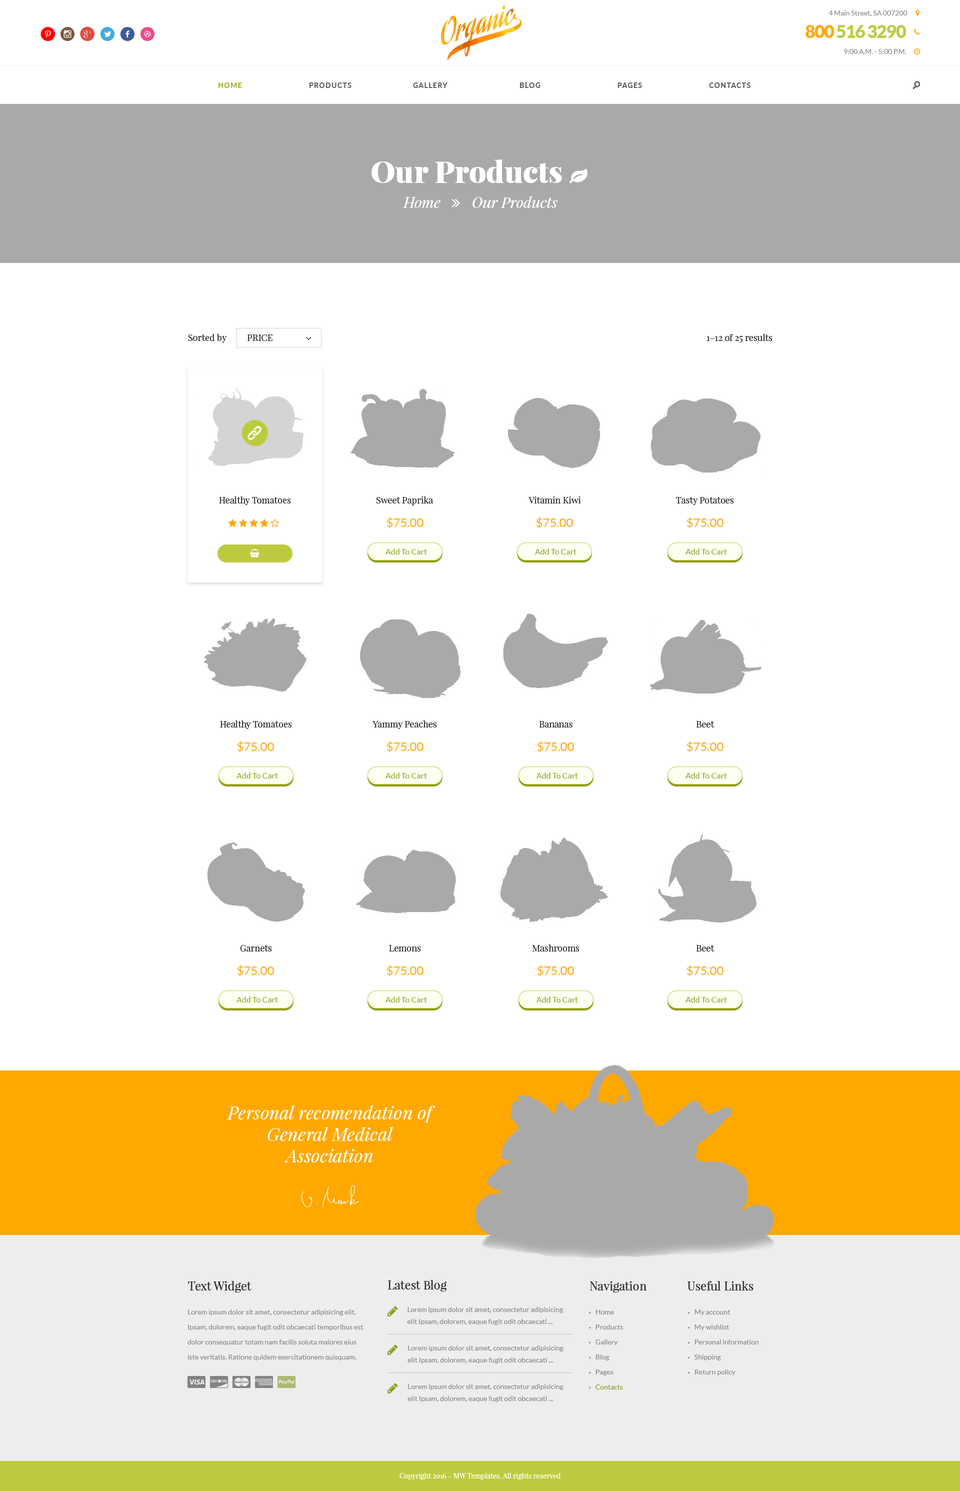
<style>
.page{position:relative;width:960px;height:1491px;background:#ffffff}
.page>*{position:absolute;margin:0}
.t1{font:7px "Lato-Regular";color:#898989}
.t2{font:20px "SocialicoPlus";letter-spacing:0.2em;color:#ff0000}
.t3{font:20px "SocialicoPlus";letter-spacing:0.2em;color:#7c5641}
.t4{font:20px "SocialicoPlus";letter-spacing:0.2em;color:#dd4e41}
.t5{font:20px "Socialico";letter-spacing:0.2em;color:#41abe1}
.t6{font:20px "Socialico";letter-spacing:0.2em;color:#3d5a98}
.t7{font:20px "Socialico";letter-spacing:0.2em;color:#ea4c89}
.t8{font:18px "Lato-Black";letter-spacing:-0.05em;color:#bdcc41}
.t9{font:18px "Lato-Black";letter-spacing:-0.05em;color:#ffa800}
.t10{font:7px "Lato-Heavy";letter-spacing:0.1em;color:#a6b525;text-transform:uppercase}
.t11{font:7px "Lato-Heavy";letter-spacing:0.1em;color:#606060;text-transform:uppercase}
.t12{font:15px "SocialicoPlus";color:#606060;text-transform:uppercase}
.t13{font:9px "PlayfairDisplay-Regular";color:#333333}
.t14{font:9px "PlayfairDisplay-Regular";color:#333333;text-transform:uppercase}
.t15{font:12px "Lato-Regular";color:#ffa800}
.t16{font:8px "Lato-Regular";color:#909e1a}
.t17{font:18px "PlayfairDisplay-Italic";color:#ffffff}
.t18{font:12px "PlayfairDisplay-Regular";color:#333333}
.t19{font:7px/15px "Lato-Regular";color:#898989}
.t20{font:7px/12px "Lato-Regular";color:#898989}
.t21{font:7px/15px "MyriadPro-Regular";color:#898989;text-transform:uppercase}
.t22{font:7px/15px "MyriadPro-Regular";color:#909e1a;text-transform:uppercase}
.t23{font:7px/15px "Lato-Regular";color:#909e1a}
.t24{font:7px "PlayfairDisplay-Regular";color:#ffffff}
</style>
<div class="page">
<p class="t1" style="left:828px;top:10px;width:80px;height:6px">4 Main Street, SA 007200</p>
<p class="t2" style="left:40px;top:26px;width:114px;height:15px">p<span class="t3">i</span><span class="t4">h</span><span class="t5">l</span><span class="t6">f</span><span class="t7">d</span></p>
<p class="t8" style="left:806px;top:25px;width:100px;height:13px"><span class="t9">800</span> 516 3290</p>
<p class="t1" style="left:844px;top:49px;width:62px;height:5px">9:00 A.M. - 5:00 P.M.</p>
<p class="t10" style="left:218px;top:82px;width:24px;height:6px">Home</p>
<p class="t11" style="left:309px;top:82px;width:43px;height:6px">Products</p>
<p class="t11" style="left:413px;top:82px;width:35px;height:6px">Gallery</p>
<p class="t11" style="left:520px;top:82px;width:20px;height:6px">Blog</p>
<p class="t11" style="left:618px;top:82px;width:24px;height:6px">Pages</p>
<p class="t11" style="left:709px;top:82px;width:41px;height:6px">Contacts</p>
<p class="t12" style="left:912px;top:81px;width:8px;height:8px">o</p>
<p class="t13" style="left:188px;top:334px;width:39px;height:8px">Sorted by</p>
<p class="t14" style="left:247px;top:334px;width:25px;height:7px">Price</p>
<p class="t13" style="left:706px;top:334px;width:66px;height:8px">1–12 of 25 results</p>
<p class="t13" style="left:219px;top:496px;width:72px;height:9px">Healthy Tomatoes</p>
<p class="t13" style="left:376px;top:496px;width:58px;height:10px">Sweet Paprika</p>
<p class="t13" style="left:528px;top:496px;width:53px;height:8px">Vitamin Kiwi</p>
<p class="t13" style="left:676px;top:497px;width:58px;height:8px">Tasty Potatoes</p>
<p class="t15" style="left:386px;top:517px;width:38px;height:11px">$75.00</p>
<p class="t15" style="left:536px;top:517px;width:37px;height:11px">$75.00</p>
<p class="t15" style="left:686px;top:517px;width:38px;height:11px">$75.00</p>
<p class="t16" style="left:386px;top:548px;width:41px;height:6px">Add To Cart</p>
<p class="t16" style="left:535px;top:548px;width:41px;height:6px">Add To Cart</p>
<p class="t16" style="left:686px;top:548px;width:41px;height:6px">Add To Cart</p>
<p class="t13" style="left:220px;top:720px;width:72px;height:9px">Healthy Tomatoes</p>
<p class="t13" style="left:372px;top:720px;width:65px;height:9px">Yammy Peaches</p>
<p class="t13" style="left:539px;top:721px;width:33px;height:7px">Bananas</p>
<p class="t13" style="left:696px;top:721px;width:18px;height:7px">Beet</p>
<p class="t15" style="left:237px;top:741px;width:37px;height:11px">$75.00</p>
<p class="t15" style="left:386px;top:741px;width:38px;height:11px">$75.00</p>
<p class="t15" style="left:537px;top:741px;width:37px;height:11px">$75.00</p>
<p class="t15" style="left:686px;top:741px;width:38px;height:11px">$75.00</p>
<p class="t16" style="left:236px;top:772px;width:42px;height:6px">Add To Cart</p>
<p class="t16" style="left:386px;top:772px;width:41px;height:6px">Add To Cart</p>
<p class="t16" style="left:536px;top:772px;width:42px;height:6px">Add To Cart</p>
<p class="t16" style="left:686px;top:772px;width:41px;height:6px">Add To Cart</p>
<p class="t13" style="left:240px;top:945px;width:32px;height:7px">Garnets</p>
<p class="t13" style="left:389px;top:945px;width:32px;height:7px">Lemons</p>
<p class="t13" style="left:532px;top:944px;width:48px;height:8px">Mashrooms</p>
<p class="t13" style="left:696px;top:945px;width:18px;height:7px">Beet</p>
<p class="t15" style="left:237px;top:965px;width:37px;height:11px">$75.00</p>
<p class="t15" style="left:386px;top:965px;width:38px;height:11px">$75.00</p>
<p class="t15" style="left:537px;top:965px;width:37px;height:11px">$75.00</p>
<p class="t15" style="left:686px;top:965px;width:38px;height:11px">$75.00</p>
<p class="t16" style="left:236px;top:996px;width:42px;height:6px">Add To Cart</p>
<p class="t16" style="left:386px;top:996px;width:41px;height:6px">Add To Cart</p>
<p class="t16" style="left:536px;top:996px;width:42px;height:6px">Add To Cart</p>
<p class="t16" style="left:686px;top:996px;width:41px;height:6px">Add To Cart</p>
<p class="t17" style="left:227px;top:1105px;width:208px;height:57px;text-align:center">Personal recomendation of General Medical Association</p>
<p class="t18" style="left:188px;top:1281px;width:64px;height:11px">Text Widget</p>
<p class="t18" style="left:388px;top:1280px;width:59px;height:12px">Latest Blog</p>
<p class="t18" style="left:590px;top:1281px;width:57px;height:11px">Navigation</p>
<p class="t18" style="left:688px;top:1281px;width:66px;height:9px">Useful Links</p>
<p class="t19" style="left:188px;top:1310px;width:176px;height:50px">Lorem ipsum dolor sit amet, consectetur adipisicing elit. Ipsam, dolorem, eaque fugit odit obcaecati temporibus est dolor consequatur totam nam facilis soluta maiores eius iste veritatis. Ratione quidem exercitationem quisquam.</p>
<p class="t20" style="left:407px;top:1307px;width:157px;height:18px">Lorem ipsum dolor sit amet, consectetur adipisicing elit Ipsam, dolorem, eaque fugit odit obcaecati ...</p>
<p class="t19" style="left:589px;top:1310px;width:34px;height:80px"><span class="t21">•   </span>Home<br><span class="t21">•   </span>Products<br><span class="t21">•   </span>Gallery<br><span class="t21">•   </span>Blog<br><span class="t21">•   </span>Pages<br><span class="t22">•   </span><span class="t23">Contacts</span></p>
<p class="t19" style="left:688px;top:1310px;width:70px;height:66px"><span class="t21">•   </span>My account<br><span class="t21">•   </span>My wishlist<br><span class="t21">•   </span>Personal information<br><span class="t21">•   </span>Shipping<br><span class="t21">•   </span>Return policy</p>
<p class="t20" style="left:408px;top:1346px;width:156px;height:18px">Lorem ipsum dolor sit amet, consectetur adipisicing elit Ipsam, dolorem, eaque fugit odit obcaecati ...</p>
<p class="t20" style="left:408px;top:1384px;width:156px;height:18px">Lorem ipsum dolor sit amet, consectetur adipisicing elit Ipsam, dolorem, eaque fugit odit obcaecati ...</p>
<p class="t24" style="left:400px;top:1472px;width:160px;height:8px">Copyright 2016 - MW Templates. All rights reserved</p>
</div>
